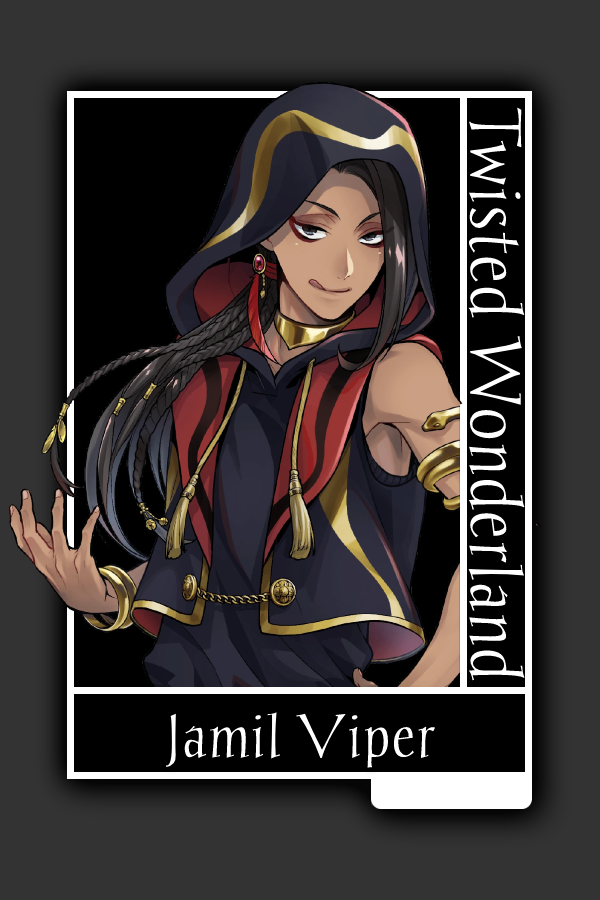
<style>
.page{position:relative;width:600px;height:900px;background:#333333}
.page>*{position:absolute;margin:0}
.t1{font:60px "Chantelli-Antiqua";color:#ffffff}
.t2{font:50px "Chantelli-Antiqua";color:#ffffff}
</style>
<div class="page">
<p class="t1" style="left:468px;top:107px;width:57px;height:574px;rotate:90deg">Twisted Wonderland</p>
<p class="t2" style="left:166px;top:712px;width:270px;height:56px">Jamil Viper</p>
</div>
